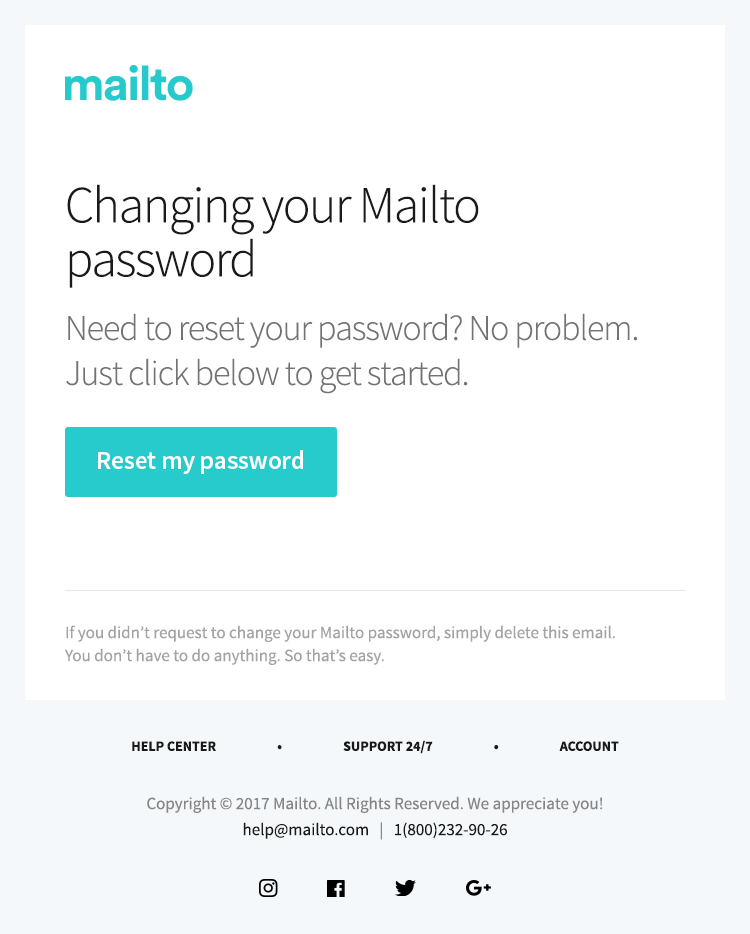
<style>
.page{position:relative;width:750px;height:934px;background:#ffffff}
.page>*{position:absolute;margin:0}
.t1{font:52px/54px "SourceSansPro-Light";letter-spacing:-0.03em;color:#1a1a1a}
.t2{font:36px/45px "SourceSansPro-Light";letter-spacing:-0.03em;color:#737373}
.t3{font:26px "SourceSansPro-Semibold";letter-spacing:-0.015em;color:#ffffff}
.t4{font:17px/23px "SourceSansPro-Regular";color:#a3a3a3}
.t5{font:14px "SourceSansPro-Bold";color:#1a1a1a}
.t6{font:17px/26px "SourceSansPro-Regular";color:#868686}
.t7{font:17px/26px "SourceSansPro-Regular";color:#1a1a1a}
</style>
<div class="page">
<p class="t1" style="left:67px;top:184px;width:412px;height:104px">Changing your Mailto password</p>
<p class="t2" style="left:66px;top:313px;width:571px;height:81px">Need to reset your password? No problem. Just click below to get started.</p>
<p class="t3" style="left:98px;top:450px;width:205px;height:24px">Reset my password</p>
<p class="t4" style="left:64px;top:625px;width:551px;height:40px">If you didn’t request to change your Mailto password, simply delete this email. <br>You don’t have to do anything. So that’s easy.</p>
<p class="t5" style="left:132px;top:740px;width:487px;height:14px">HELP CENTER                     •                     SUPPORT 24/7                     •                     ACCOUNT</p>
<p class="t6" style="left:147px;top:796px;width:456px;height:44px;text-align:center">Copyright © 2017 Mailto. All Rights Reserved. We appreciate you!<br><span class="t7">help@mailto.com </span>  |   <span class="t7">1(800)232-90-26</span></p>
</div>
